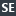
<style>
.page{position:relative;width:16px;height:16px;background:#323b44}
.page>*{position:absolute;margin:0}
.t1{font:12px "MicrosoftTaiLe-Bold";color:#ffffff}
</style>
<div class="page">
<p class="t1" style="left:1px;top:3px;width:14px;height:9px">SE</p>
</div>
